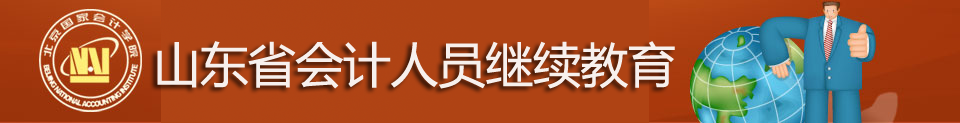
<style>
.page{position:relative;width:960px;height:123px}
.page>*{position:absolute;margin:0}
.t1{font:48px "MicrosoftYaHei";letter-spacing:-0.01em;color:#f7f0ed}
</style>
<div class="page">
<p class="t1" style="left:157px;top:41px;width:518px;height:48px">山东省会计人员继续教育</p>
</div>
